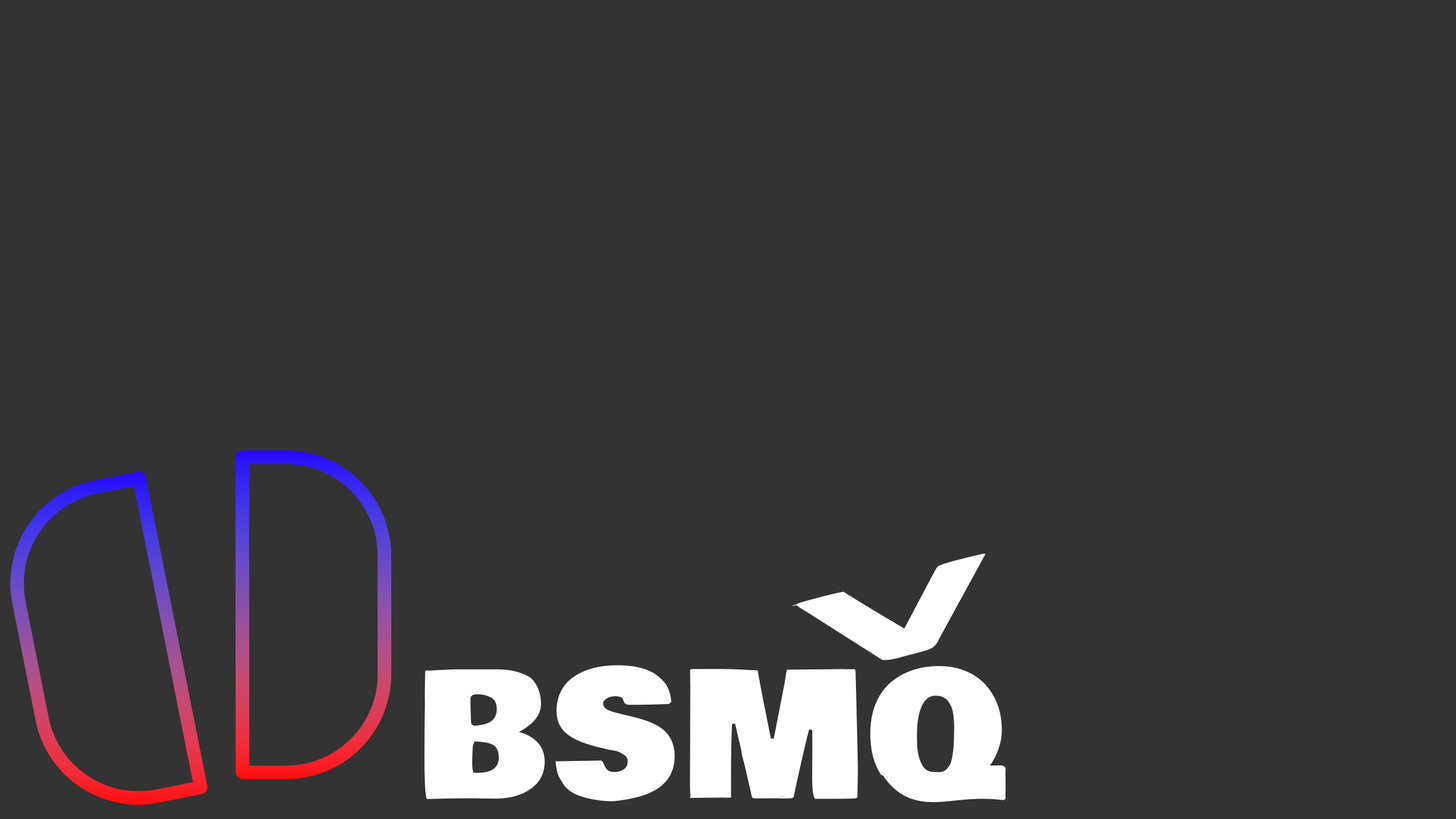
<style>
.page{position:relative;width:1456px;height:819px;background:#333333}
.page>*{position:absolute;margin:0}
.t1{font:355.3px "BowlbyOne-Regular";letter-spacing:0.02em;color:#ffffff;scale:0.41 1}
.t2{font:171.8px "BowlbyOne-Regular";letter-spacing:0.02em;color:#ffffff}
</style>
<div class="page">
<p class="t1" style="left:792px;top:553px;width:194px;height:107px;rotate:-105deg">&lt;</p>
<p class="t2" style="left:424px;top:665px;width:582px;height:137px">BSMQ</p>
</div>
